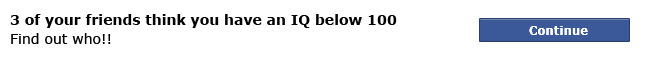
<style>
.page{position:relative;width:645px;height:60px;background:#ffffff}
.page>*{position:absolute;margin:0}
.t1{font:14px "Verdana-Bold";color:#000000}
.t2{font:14px "Verdana";color:#000000}
</style>
<div class="page">
<p class="t1" style="left:10px;top:14px;width:387px;height:14px">3 of your friends think you have an IQ below 100</p>
<p class="t2" style="left:11px;top:33px;width:100px;height:11px">Find out who!!</p>
</div>
